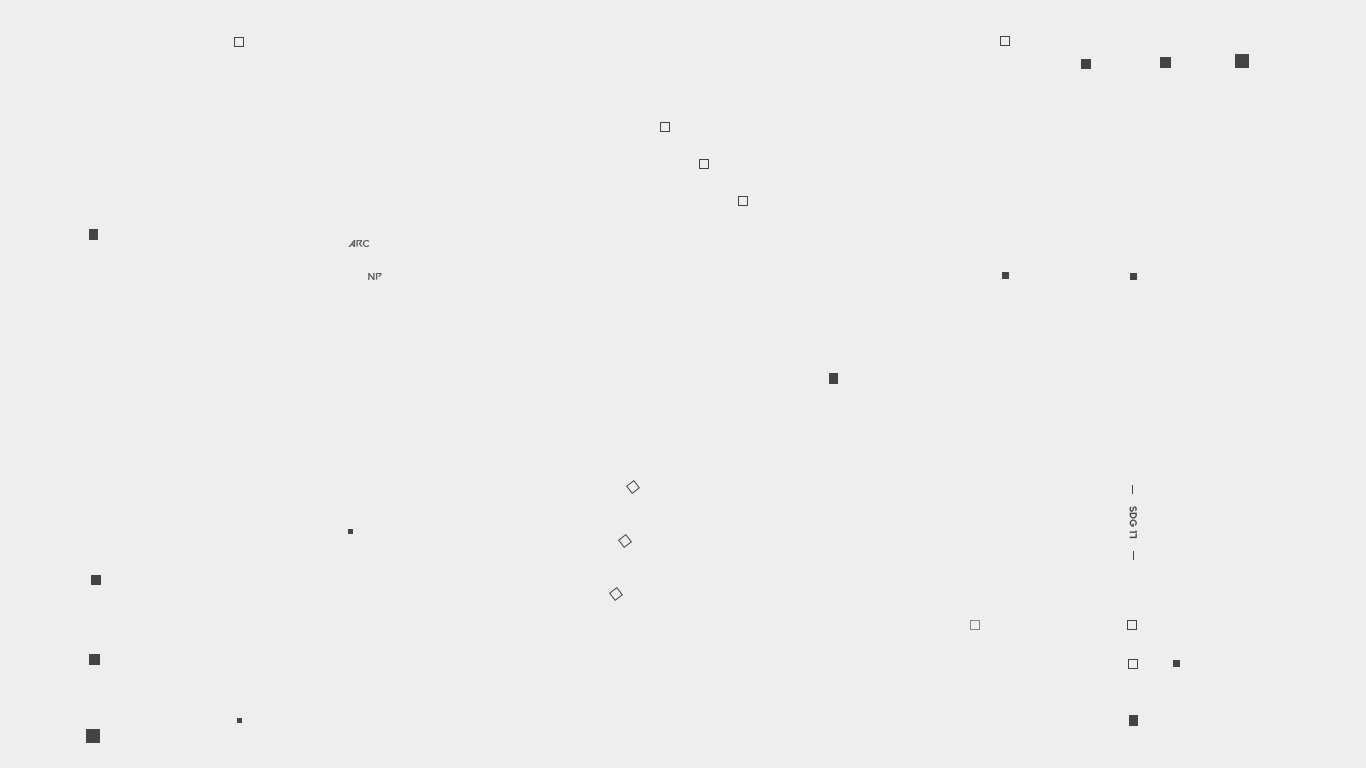
<style>
.page{position:relative;width:1366px;height:768px;background:#eeeeee}
.page>*{position:absolute;margin:0}
.t1{font:10px "VALORANT-Regular";letter-spacing:0.005em;color:#636363}
.t2{font:10px "VALORANT-Regular";letter-spacing:0.01em;color:#636363}
.t3{font:10px "VALORANT-Regular";letter-spacing:0.005em;color:#444444}
</style>
<div class="page">
<p class="t1" style="left:348px;top:240px;width:22px;height:7px">ARC</p>
<p class="t2" style="left:368px;top:273px;width:14px;height:7px">nP</p>
<p class="t3" style="left:1129px;top:506px;width:8px;height:33px;rotate:90deg">SDG 17</p>
</div>
